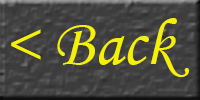
<style>
.page{position:relative;width:200px;height:100px}
.page>*{position:absolute;margin:0}
.t1{font:67px "MonotypeCorsiva";color:#f4f104}
</style>
<div class="page">
<p class="t1" style="left:11px;top:18px;width:178px;height:59px">&lt; Back</p>
</div>
